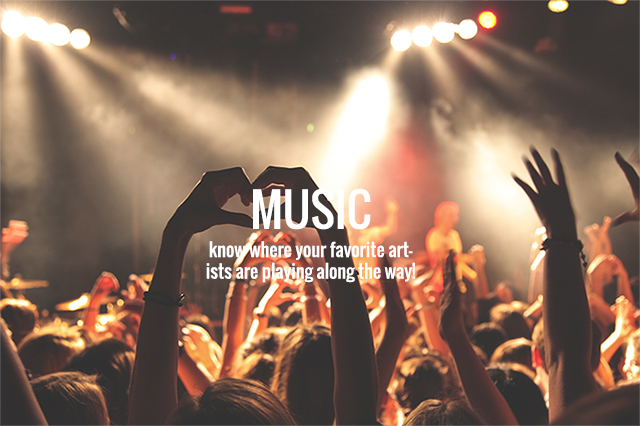
<style>
.page{position:relative;width:640px;height:426px}
.page>*{position:absolute;margin:0}
.t1{font:45.1px "Oswald-Regular";color:#ffffff}
.t2{font:18px "Oswald-Regular";color:#ffffff}
</style>
<div class="page">
<p class="t1" style="left:253px;top:188px;width:118px;height:42px">MUSIC</p>
<p class="t2" style="left:206px;top:241px;width:209px;height:42px;text-align:center">know where your favorite artists are playing along the way!</p>
</div>
